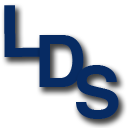
<style>
.page{position:relative;width:128px;height:128px;background:#ffffff}
.page>*{position:absolute;margin:0}
.t1{font:72px "Helvetica-Bold";color:#072b63}
</style>
<div class="page">
<p class="t1" style="left:4px;top:5px;width:38px;height:52px">L</p>
<p class="t1" style="left:39px;top:35px;width:45px;height:52px">D</p>
<p class="t1" style="left:76px;top:65px;width:43px;height:54px">S</p>
</div>
